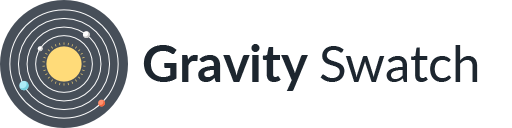
<style>
.page{position:relative;width:512px;height:128px;background:#ffffff}
.page>*{position:absolute;margin:0}
.t1{font:50.7px "Lato-Bold";color:#1d262f}
.t2{font:50.7px "Lato-Regular";color:#1d262f}
</style>
<div class="page">
<p class="t1" style="left:143px;top:44px;width:335px;height:47px">Gravity <span class="t2">Swatch</span></p>
</div>
